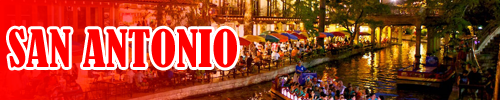
<style>
.page{position:relative;width:500px;height:100px}
.page>*{position:absolute;margin:0}
.t1{font:48px "BernardMT-Condensed";color:#ff0000}
</style>
<div class="page">
<p class="t1" style="left:9px;top:28px;width:228px;height:40px">SAN ANTONIO</p>
</div>
